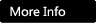
<style>
.page{position:relative;width:96px;height:23px;background:#000000}
.page>*{position:absolute;margin:0}
.t1{font:13px "SegoeUI";letter-spacing:-0.005em;color:#ffffff}
</style>
<div class="page">
<p class="t1" style="left:10px;top:6px;width:56px;height:11px">More Info</p>
</div>
